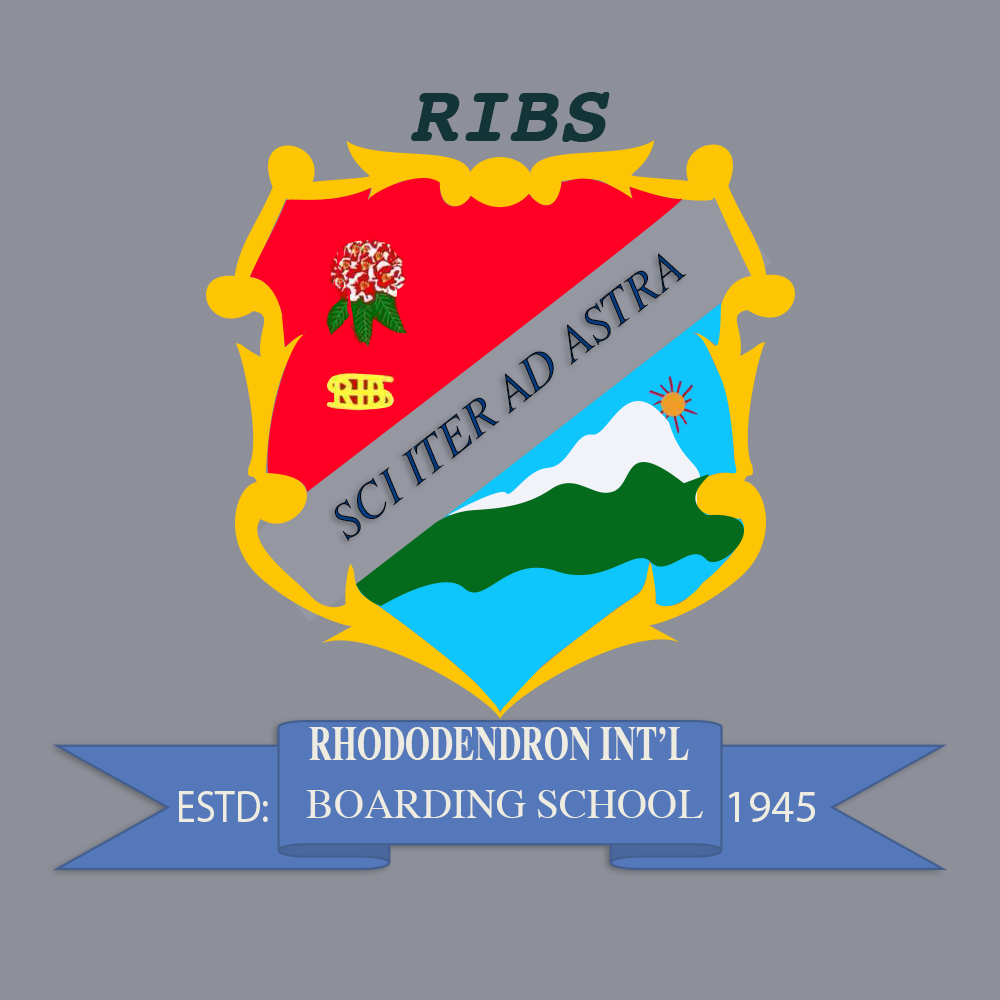
<style>
.page{position:relative;width:1000px;height:1000px;background:#8d9098}
.page>*{position:absolute;margin:0}
.t1{font:83.3px "Courier-BoldOblique";color:#133538}
.t2{font:50px "Times-Bold";color:#eeebe1;scale:0.64 1}
.t3{font:44.8px "MyriadPro-Regular";color:#eeebe1;scale:0.89 1}
.t4{font:41.7px "Times-Roman";color:#eeebe1}
.t5{font:45.8px "MyriadPro-Regular";color:#eeebe1}
</style>
<div class="page">
<p class="t1" style="left:411px;top:92px;width:199px;height:50px">RIBS</p>
<p class="t2" style="left:309px;top:727px;width:380px;height:33px">RHODODENDRON INT’L</p>
<p class="t3" style="left:179px;top:791px;width:89px;height:31px">ESTD:</p>
<p class="t4" style="left:306px;top:790px;width:397px;height:28px">BOARDING SCHOOL</p>
<p class="t5" style="left:729px;top:792px;width:86px;height:30px">1945</p>
</div>
